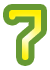
<style>
.page{position:relative;width:50px;height:70px;background:#ffffff}
.page>*{position:absolute;margin:0}
.t1{font:64px "OCRAStd"}
</style>
<div class="page">
<p class="t1" style="left:9px;top:10px;width:32px;height:50px">7</p>
</div>
